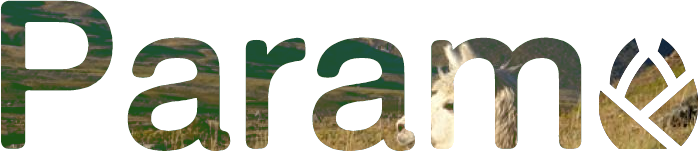
<style>
.page{position:relative;width:698px;height:151px;background:#ffffff}
.page>*{position:absolute;margin:0}
.t1{font:200px "AlteHaasGrotesk";font-weight:bold}
</style>
<div class="page">
<p class="t1" style="left:0px;top:0px;width:582px;height:151px">Param</p>
</div>
